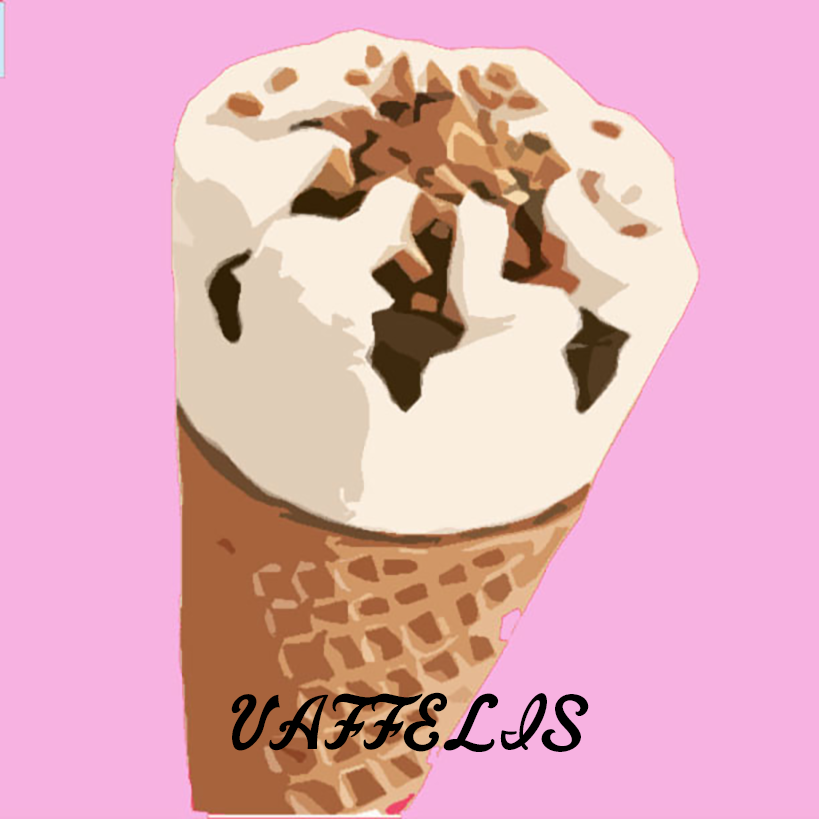
<style>
.page{position:relative;width:819px;height:819px;background:#f7b2e1}
.page>*{position:absolute;margin:0}
.t1{font:72px "FenwayParkJF";letter-spacing:0.025em;color:#000000}
</style>
<div class="page">
<p class="t1" style="left:231px;top:692px;width:358px;height:60px">VAFFELIS</p>
</div>
